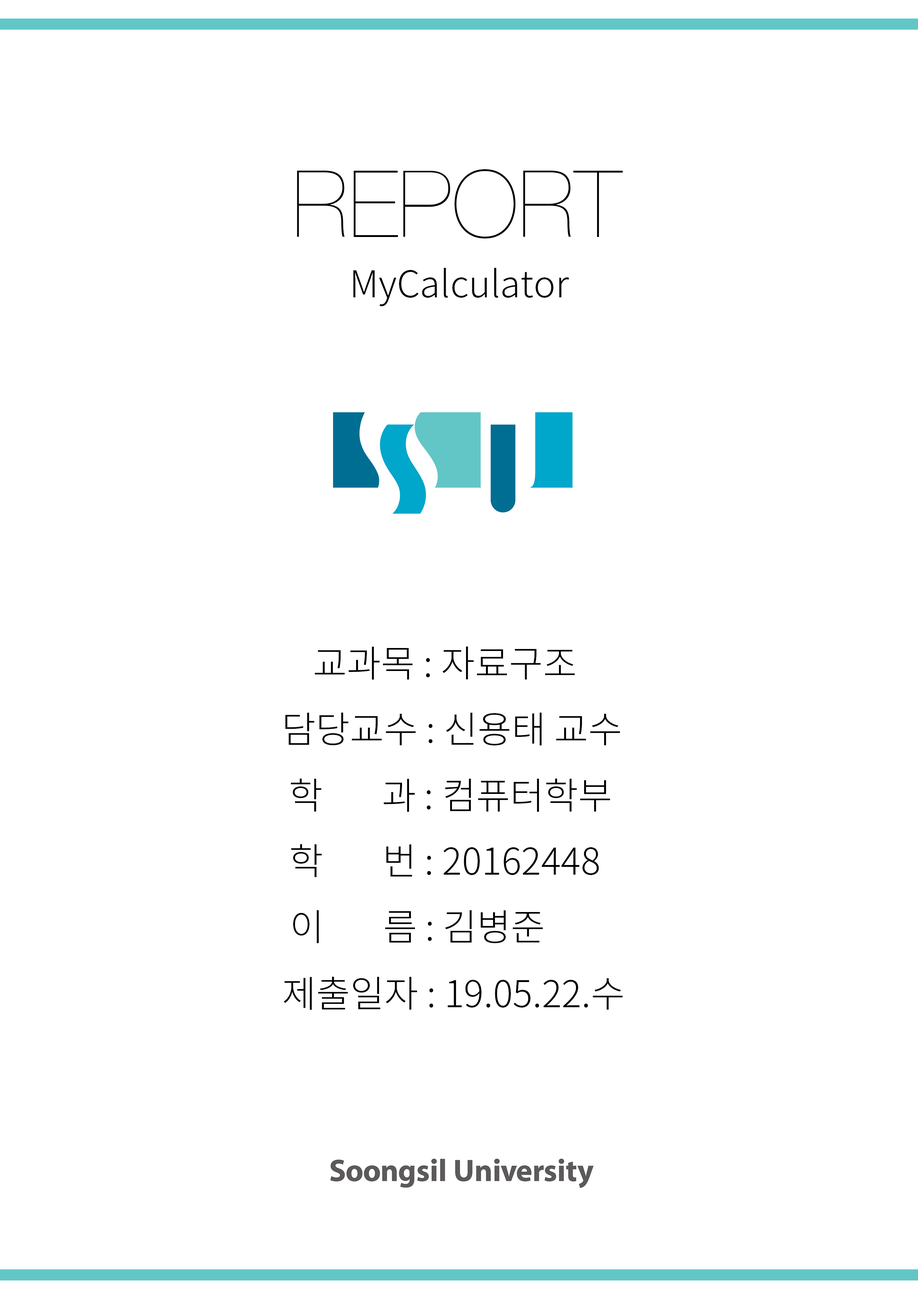
<style>
.page{position:relative;width:918px;height:1299px;background:#ffffff}
.page>*{position:absolute;margin:0}
.t1{font:37px "NotoSansCJKkr-Light";color:#000000}
</style>
<div class="page">
<p class="t1" style="left:353px;top:268px;width:216px;height:38px">MyCalculator</p>
<p class="t1" style="left:315px;top:646px;width:260px;height:34px">교과목 : 자료구조</p>
<p class="t1" style="left:285px;top:712px;width:335px;height:33px">담당교수 : 신용태 교수</p>
<p class="t1" style="left:291px;top:778px;width:319px;height:34px">학     과 : 컴퓨터학부</p>
<p class="t1" style="left:291px;top:844px;width:308px;height:33px">학     번 : 20162448</p>
<p class="t1" style="left:293px;top:910px;width:250px;height:33px">이      름 : 김병준</p>
<p class="t1" style="left:284px;top:976px;width:339px;height:34px">제출일자 : 19.05.22.수</p>
</div>
